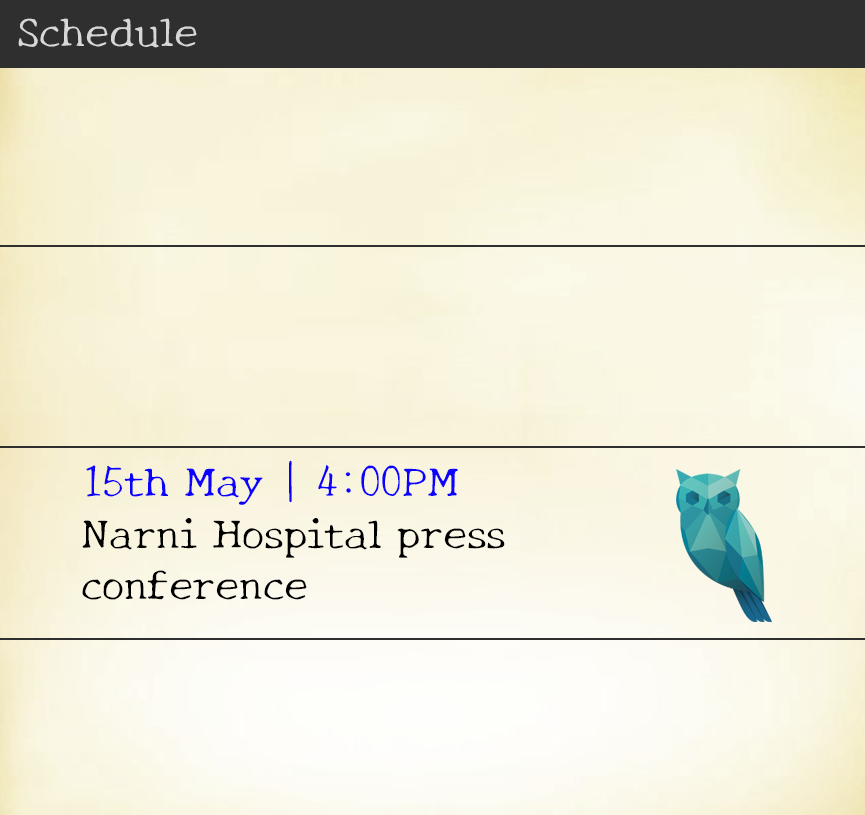
<style>
.page{position:relative;width:865px;height:815px}
.page>*{position:absolute;margin:0}
.t1{font:42.7px "NewTegomin-Regular";color:#d7d7d7}
.t2{font:42.7px "NewTegomin-Regular";color:#000000}
.t3{font:42.7px "NewTegomin-Regular";color:#0c00ff}
</style>
<div class="page">
<p class="t1" style="left:18px;top:18px;width:179px;height:30px">Schedule</p>
<p class="t2" style="left:82px;top:460px;width:423px;height:140px"><span class="t3">15th May | 4:00PM<br></span>Narni Hospital press conference</p>
</div>
